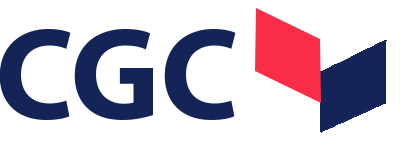
<style>
.page{position:relative;width:400px;height:150px;background:#ffffff}
.page>*{position:absolute;margin:0}
.t1{font:132.1px "MyriadPro-Bold";color:#142457}
</style>
<div class="page">
<p class="t1" style="left:0px;top:29px;width:236px;height:91px">CGC</p>
</div>
